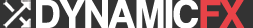
<style>
.page{position:relative;width:253px;height:28px;background:#333333}
.page>*{position:absolute;margin:0}
.t1{font:38.2px "Helvetica-Bold";letter-spacing:-0.075em;color:#ffffff;font-weight:bold}
.t2{font:38.2px "Helvetica-Bold";letter-spacing:-0.075em;color:#e94348;font-weight:bold}
</style>
<div class="page">
<p class="t1" style="left:36px;top:0px;width:209px;height:29px">DYNAMIC<span class="t2">FX</span></p>
</div>
